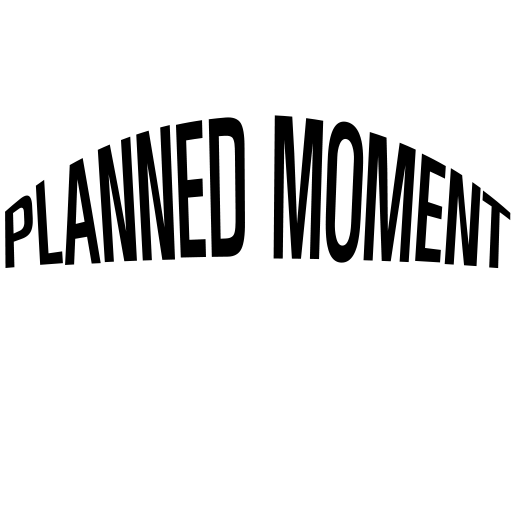
<style>
.page{position:relative;width:512px;height:512px;background:#ffffff}
.page>*{position:absolute;margin:0}
.t1{font:65px "H2hdrM";color:#000000}
</style>
<div class="page">
<p class="t1" style="left:5px;top:115px;width:506px;height:154px;text-align:center">PLANNED MOMENT</p>
</div>
